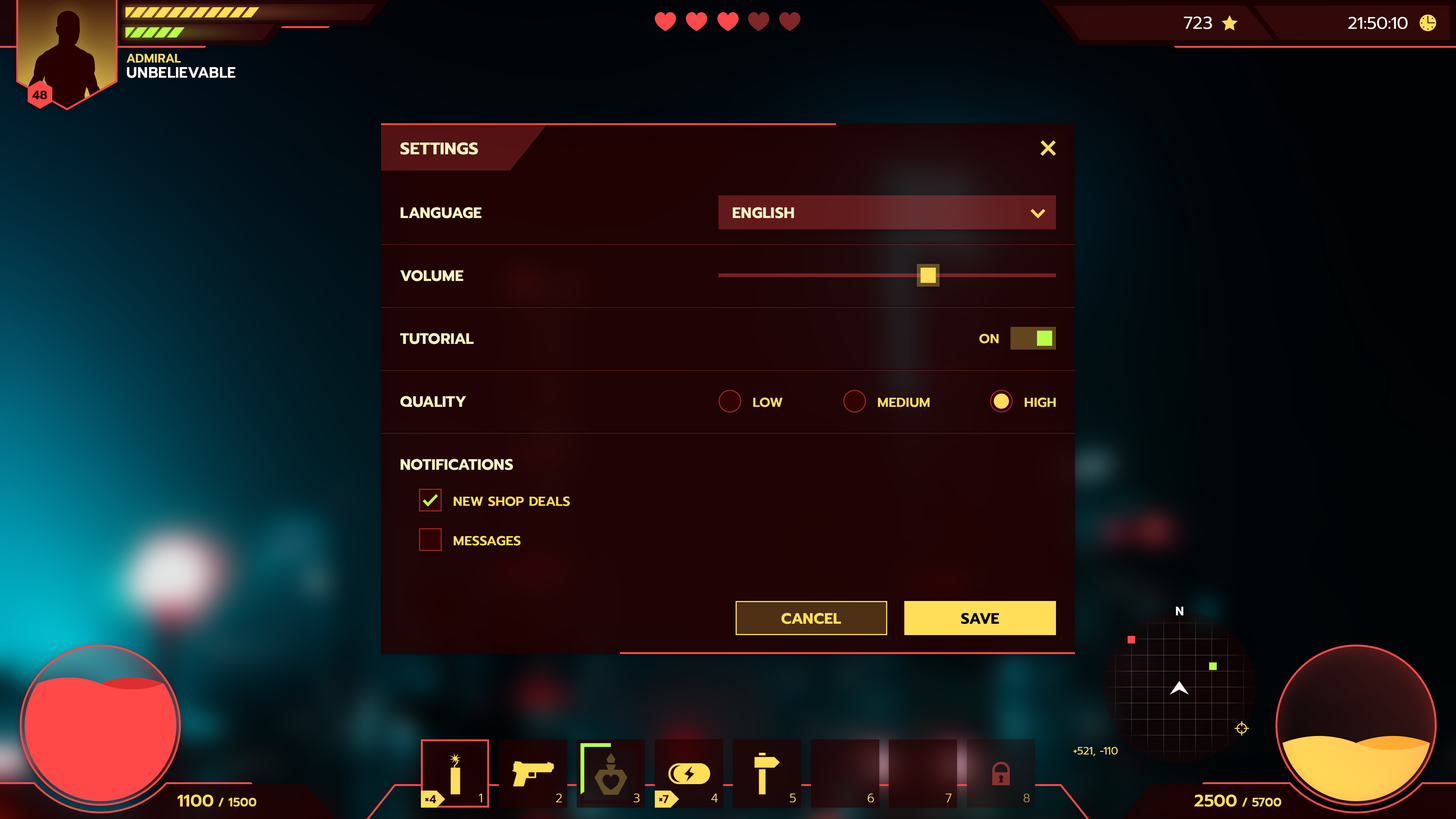
<style>
.page{position:relative;width:1456px;height:819px}
.page>*{position:absolute;margin:0}
.t1{font:17.4px "Prompt-Regular";color:#ffffff;text-transform:uppercase}
.t2{font:17.1px "Prompt-Regular";color:#ffffff;text-transform:uppercase}
.t3{font:15.2px/15.2px "Prompt-SemiBold";color:#ffffff;text-transform:uppercase}
.t4{font:12.1px/15.2px "Prompt-SemiBold";color:#ffde58;text-transform:uppercase}
.t5{font:12.1px "Prompt-Bold";color:#280000;text-transform:uppercase}
.t6{font:17.1px "Prompt-Bold";color:#fff3c0;text-transform:uppercase}
.t7{font:15.2px "Prompt-Bold";color:#fff3c0;text-transform:uppercase}
.t8{font:13.3px "Prompt-SemiBold";color:#ffde58;text-transform:uppercase}
.t9{font:15.2px "Prompt-Bold";color:#ffde58;text-transform:uppercase}
.t10{font:15.2px "Prompt-Bold";color:#000000;text-transform:uppercase}
.t11{font:12.1px "Prompt-SemiBold";color:#ffffff;text-transform:uppercase}
.t12{font:10.6px "Prompt-Regular";color:#ffde58;text-transform:uppercase}
.t13{font:12.1px "Prompt-SemiBold";color:#ffde58;text-transform:uppercase}
.t14{font:17.1px "Prompt-SemiBold";color:#ffde58;text-transform:uppercase}
.t15{font:11.4px "Prompt-SemiBold";color:#280000;text-transform:uppercase}
.t16{font:12.1px "Prompt-Light";color:#ffde58;text-transform:uppercase}
.t17{font:12.1px "Prompt-Light";color:#a6913c;text-transform:uppercase}
</style>
<div class="page">
<p class="t1" style="left:1184px;top:16px;width:28px;height:13px">723</p>
<p class="t2" style="left:1348px;top:17px;width:60px;height:12px">21:50:10</p>
<p class="t3" style="left:127px;top:54px;width:108px;height:24px"><span class="t4">Admiral<br></span>unbelievable</p>
<p class="t5" style="left:32px;top:91px;width:15px;height:8px">48</p>
<p class="t6" style="left:400px;top:142px;width:78px;height:13px">Settings</p>
<p class="t7" style="left:400px;top:207px;width:82px;height:11px">language</p>
<p class="t7" style="left:733px;top:207px;width:61px;height:11px">english</p>
<p class="t7" style="left:400px;top:270px;width:63px;height:11px">volume</p>
<p class="t7" style="left:400px;top:333px;width:74px;height:11px">Tutorial</p>
<p class="t8" style="left:979px;top:334px;width:20px;height:10px">on</p>
<p class="t7" style="left:400px;top:396px;width:66px;height:11px">quality</p>
<p class="t8" style="left:753px;top:397px;width:30px;height:10px">Low</p>
<p class="t8" style="left:878px;top:398px;width:52px;height:9px">Medium</p>
<p class="t8" style="left:1024px;top:397px;width:32px;height:10px">High</p>
<p class="t7" style="left:400px;top:459px;width:113px;height:11px">Notifications</p>
<p class="t8" style="left:453px;top:496px;width:117px;height:10px">New shop deals</p>
<p class="t8" style="left:453px;top:536px;width:68px;height:10px">messages</p>
<p class="t9" style="left:781px;top:613px;width:60px;height:11px">Cancel</p>
<p class="t10" style="left:961px;top:613px;width:38px;height:11px">save</p>
<p class="t11" style="left:1176px;top:607px;width:7px;height:8px">N</p>
<p class="t12" style="left:1073px;top:747px;width:45px;height:9px">+521, -110</p>
<p class="t13" style="left:177px;top:794px;width:79px;height:13px"><span class="t14">1100</span> / 1500</p>
<p class="t15" style="left:425px;top:795px;width:11px;height:8px">×4</p>
<p class="t16" style="left:479px;top:794px;width:3px;height:8px">1</p>
<p class="t16" style="left:556px;top:794px;width:6px;height:8px">2</p>
<p class="t16" style="left:634px;top:794px;width:6px;height:8px">3</p>
<p class="t15" style="left:659px;top:795px;width:9px;height:8px">×7</p>
<p class="t16" style="left:711px;top:794px;width:7px;height:8px">4</p>
<p class="t16" style="left:790px;top:794px;width:6px;height:8px">5</p>
<p class="t16" style="left:868px;top:794px;width:6px;height:8px">6</p>
<p class="t16" style="left:946px;top:794px;width:6px;height:8px">7</p>
<p class="t17" style="left:1023px;top:794px;width:7px;height:8px">8</p>
<p class="t13" style="left:1194px;top:794px;width:87px;height:13px"><span class="t14">2500</span> / 5700</p>
</div>
